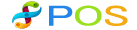
<style>
.page{position:relative;width:137px;height:30px;background:#ffffff}
.page>*{position:absolute;margin:0}
.t1{font:29.5px "MS-UIGothic";color:#2485e8;scale:1.53 1}
.t2{font:29.5px "MS-UIGothic";color:#9ae021;scale:1.53 1}
.t3{font:29.5px "MS-UIGothic";color:#f2ab14;scale:1.53 1}
</style>
<div class="page">
<p class="t1" style="left:49px;top:5px;width:24px;height:21px">P</p>
<p class="t2" style="left:75px;top:5px;width:27px;height:21px">O</p>
<p class="t3" style="left:105px;top:5px;width:23px;height:21px">S</p>
</div>
